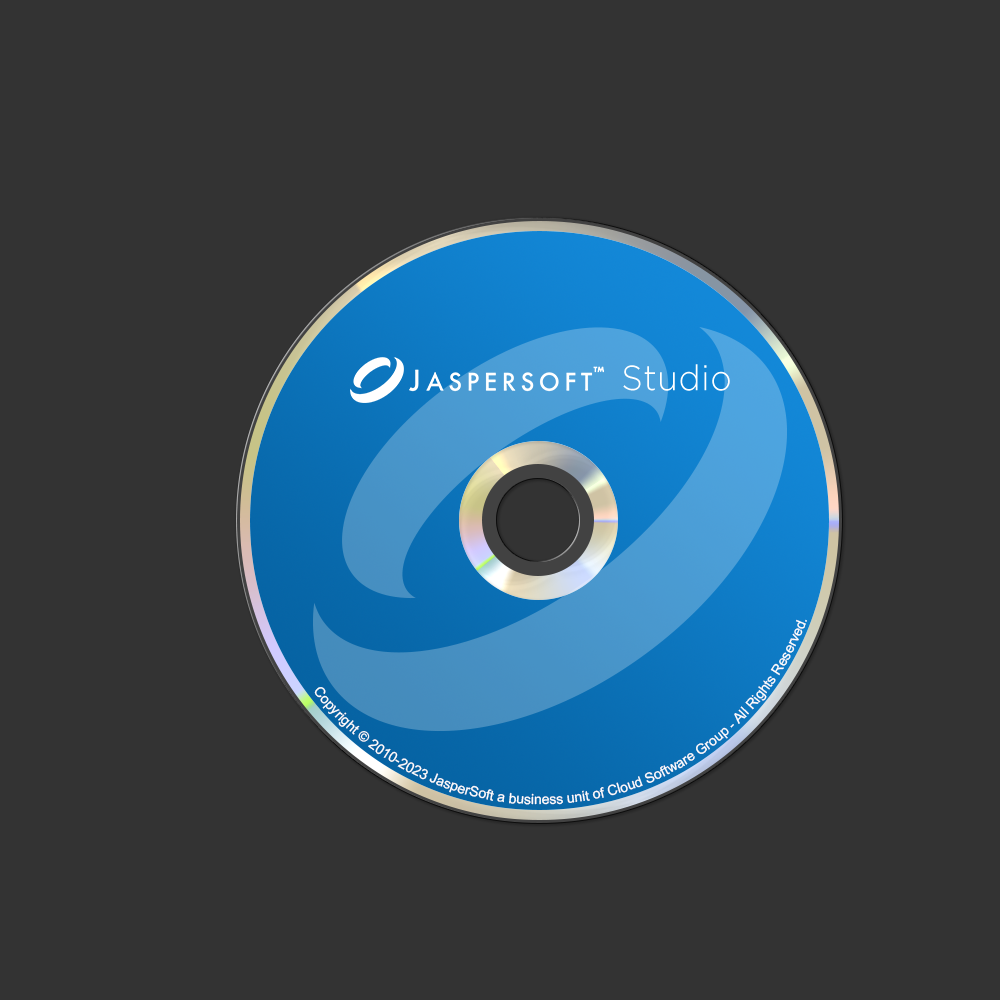
<style>
.page{position:relative;width:1000px;height:1000px;background:#333333}
.page>*{position:absolute;margin:0}
.t1{font:35.5px "GothamLight";letter-spacing:0.02em;color:#ffffff;scale:0.94 1}
.t2{font:14px "ArialMT";color:#ffffff}
</style>
<div class="page">
<p class="t1" style="left:623px;top:364px;width:107px;height:27px">Studio</p>
<p class="t2" style="left:314px;top:619px;width:493px;height:186px;rotate:26deg">Copyright © 2010-2023 JasperSoft a business unit of Cloud Software Group - All Rights Reserved.</p>
</div>
